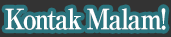
<style>
.page{position:relative;width:171px;height:37px;background:#2a747e}
.page>*{position:absolute;margin:0}
.t1{font:28px "RyuminPro-ExBold";letter-spacing:-0.08em;color:#ffffff;scale:0.9 1}
</style>
<div class="page">
<p class="t1" style="left:5px;top:8px;width:161px;height:22px">Kontak Malam!</p>
</div>
